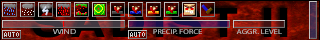
<style>
.page{position:relative;width:320px;height:40px}
.page>*{position:absolute;margin:0}
.t1{font:7px "ArialMT";color:#c1c1c1;scale:1.24 1}
.t2{font:7px "MyriadPro-Regular";scale:1.18 1}
.t3{font:7px "MyriadPro-Regular";letter-spacing:0.01em;color:#c1c1c1;scale:1.19 1}
</style>
<div class="page">
<p class="t1" style="left:53px;top:29px;width:23px;height:5px">WIND</p>
<p class="t2" style="left:153px;top:29px;width:49px;height:5px">PRECIP. FORCE</p>
<p class="t3" style="left:236px;top:29px;width:46px;height:5px">AGGR. LEVEL</p>
</div>
